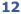
<style>
.page{position:relative;width:21px;height:14px;background:#ffffff}
.page>*{position:absolute;margin:0}
.t1{font:14px "Verdana-Bold";letter-spacing:-0.05em;color:#3557af}
</style>
<div class="page">
<p class="t1" style="left:2px;top:1px;width:18px;height:11px">12</p>
</div>
